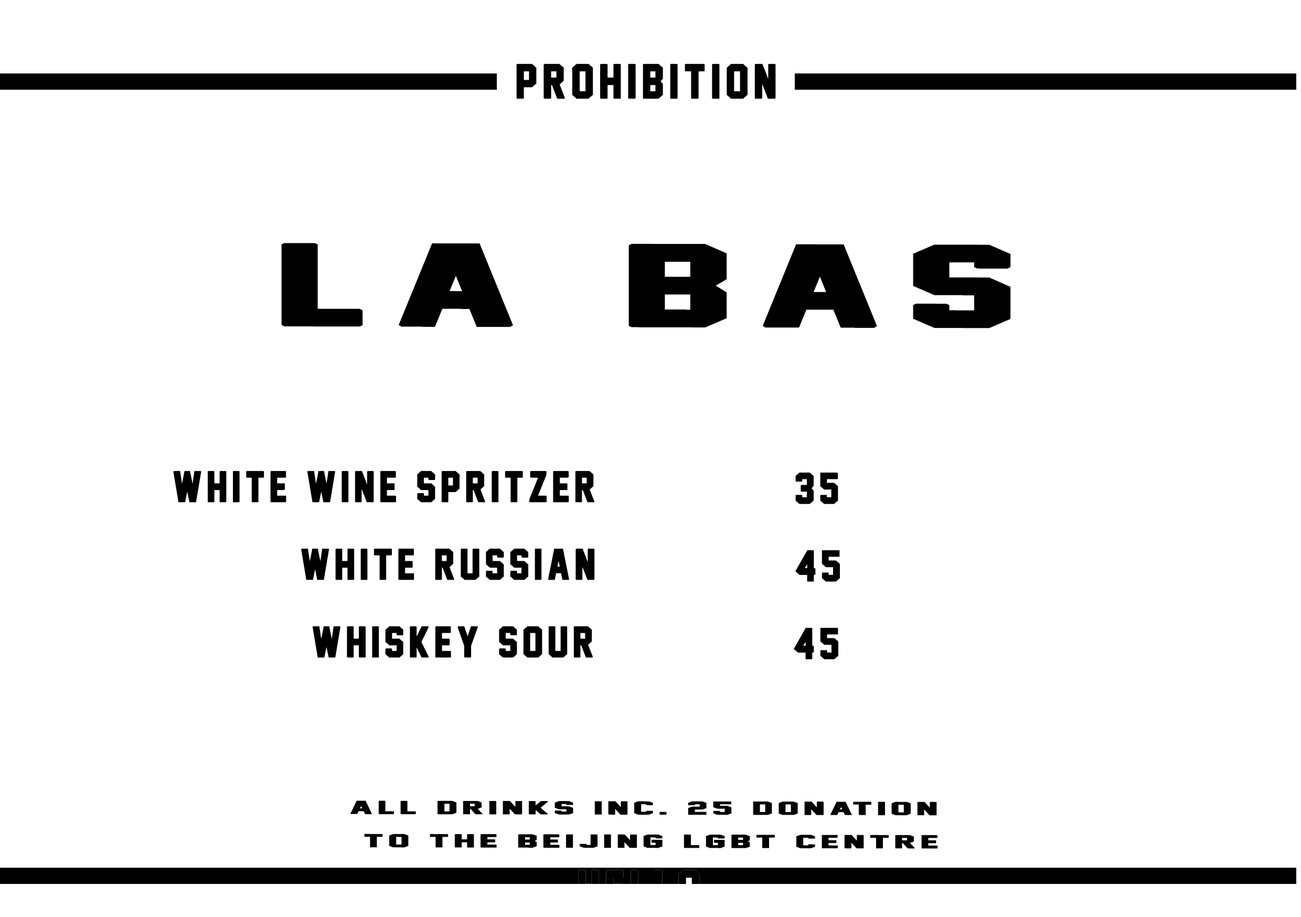
<style>
.page{position:relative;width:1301px;height:917px;background:#ffffff}
.page>*{position:absolute;margin:0}
.t1{font:43.7px "JerseyM54";letter-spacing:0.1em;color:#000000;font-weight:bold}
.t2{font:104.9px "JerseyM54";letter-spacing:0.1em;color:#000000;font-weight:bold;scale:2.04 1}
.t3{font:39.3px "JerseyM54";letter-spacing:0.1em;color:#000000;font-weight:bold}
.t4{font:39.6px "JerseyM54";letter-spacing:0.1em;color:#000000;font-weight:bold}
.t5{font:16.8px/33.2px "JerseyM54";letter-spacing:0.1em;color:#000000;font-weight:bold;scale:2.4 1}
</style>
<div class="page">
<p class="t1" style="left:516px;top:63px;width:260px;height:36px">prohibition</p>
<p class="t2" style="left:281px;top:243px;width:730px;height:85px">la bas</p>
<p class="t3" style="left:173px;top:470px;width:421px;height:32px">white wine spritzer</p>
<p class="t4" style="left:795px;top:472px;width:43px;height:32px">35</p>
<p class="t3" style="left:301px;top:548px;width:294px;height:32px">white russian</p>
<p class="t4" style="left:795px;top:550px;width:45px;height:32px">45</p>
<p class="t3" style="left:312px;top:626px;width:281px;height:32px">whiskey sour</p>
<p class="t4" style="left:794px;top:627px;width:44px;height:32px">45</p>
<p class="t5" style="left:350px;top:800px;width:588px;height:49px;text-align:center">all drinks inc. 25 donation<br> to the beijing lgbt centre</p>
</div>
